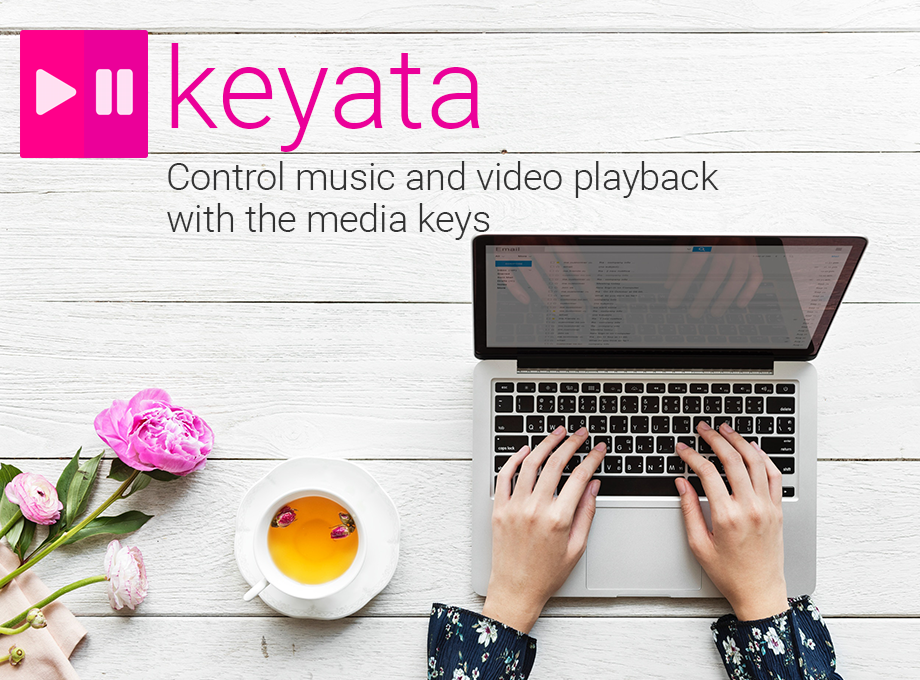
<style>
.page{position:relative;width:920px;height:680px}
.page>*{position:absolute;margin:0}
.t1{font:113.4px "Roboto-Light";color:#eb0099}
.t2{font:37.6px/36px "Roboto-Light";color:#333333}
</style>
<div class="page">
<p class="t1" style="left:171px;top:43px;width:309px;height:109px">keyata</p>
<p class="t2" style="left:167px;top:161px;width:552px;height:79px">Control music and video playback<br>with the media keys</p>
</div>
